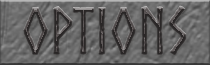
<style>
.page{position:relative;width:210px;height:65px}
.page>*{position:absolute;margin:0}
.t1{font:65px "Norse-Bold";color:#3c3939}
</style>
<div class="page">
<p class="t1" style="left:23px;top:5px;width:164px;height:51px">Options</p>
</div>
